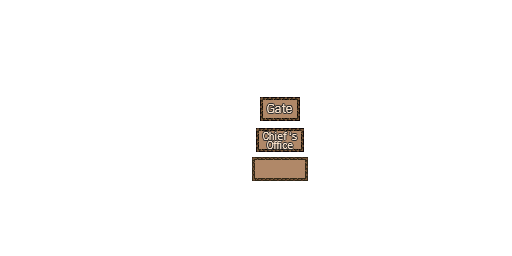
<style>
.page{position:relative;width:512px;height:256px;background:#ffffff}
.page>*{position:absolute;margin:0}
.t1{font:13.3px "FranklinGothic-Book";color:#f8e0c8}
.t2{font:10.7px/9.3px "FranklinGothic-Book";color:#f8e0c8}
</style>
<div class="page">
<p class="t1" style="left:267px;top:104px;width:25px;height:9px">Gate</p>
<p class="t2" style="left:263px;top:132px;width:34px;height:17px;text-align:center">Chief ‘s<br>Office</p>
</div>
